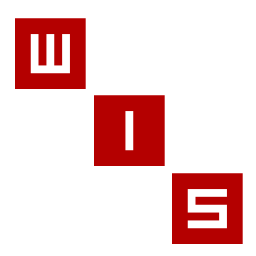
<style>
.page{position:relative;width:256px;height:256px;background:#ffffff}
.page>*{position:absolute;margin:0}
.t1{font:125.7px/77.3px "Inversionz";color:#b40000}
</style>
<div class="page">
<p class="t1" style="left:15px;top:18px;width:228px;height:226px">w<br> i<br>  s</p>
</div>
